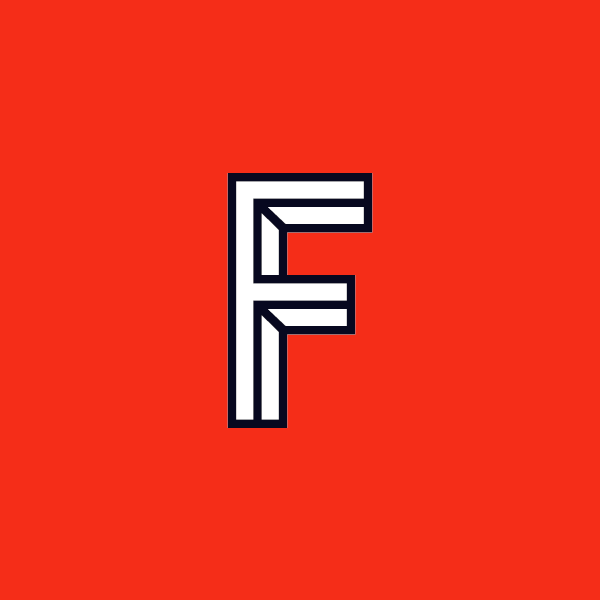
<style>
.page{position:relative;width:600px;height:600px;background:#f52d18}
.page>*{position:absolute;margin:0}
.t1{font:340px "Epilepsja-Solid";letter-spacing:0.01em}
.t2{font:340px "Epilepsja-Outline";letter-spacing:0.01em;color:#07081f}
</style>
<div class="page">
<p class="t1" style="left:227px;top:173px;width:146px;height:255px">F</p>
<p class="t2" style="left:227px;top:173px;width:146px;height:255px">F</p>
</div>
